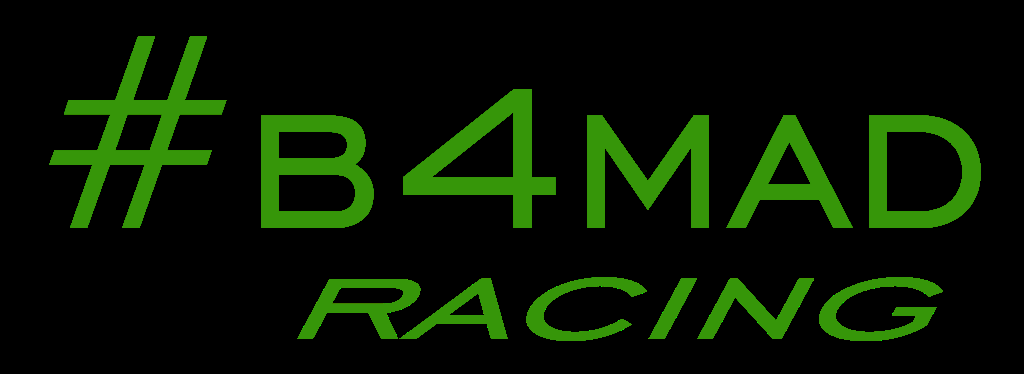
<style>
.page{position:relative;width:1024px;height:374px;background:#000000}
.page>*{position:absolute;margin:0}
.t1{font:270px "EngraversGothicBT-Regular";color:#369609}
</style>
<div class="page">
<p class="t1" style="left:49px;top:36px;width:932px;height:192px">#b4mad</p>
</div>
